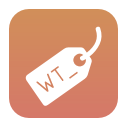
<style>
.page{position:relative;width:128px;height:128px;background:#ffffff}
.page>*{position:absolute;margin:0}
.t1{font:21.8px "GOSTTypeB";color:#d38361;scale:1.1 1}
</style>
<div class="page">
<p class="t1" style="left:36px;top:66px;width:42px;height:26px;rotate:-36deg">WT_</p>
</div>
